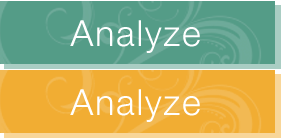
<style>
.page{position:relative;width:281px;height:138px;background:#f1ad33}
.page>*{position:absolute;margin:0}
.t1{font:36px "HelveticaNeueLTCom-Lt";letter-spacing:0.05em;color:#ffffff}
</style>
<div class="page">
<p class="t1" style="left:70px;top:20px;width:130px;height:33px">Analyze</p>
<p class="t1" style="left:70px;top:89px;width:130px;height:33px">Analyze</p>
</div>
